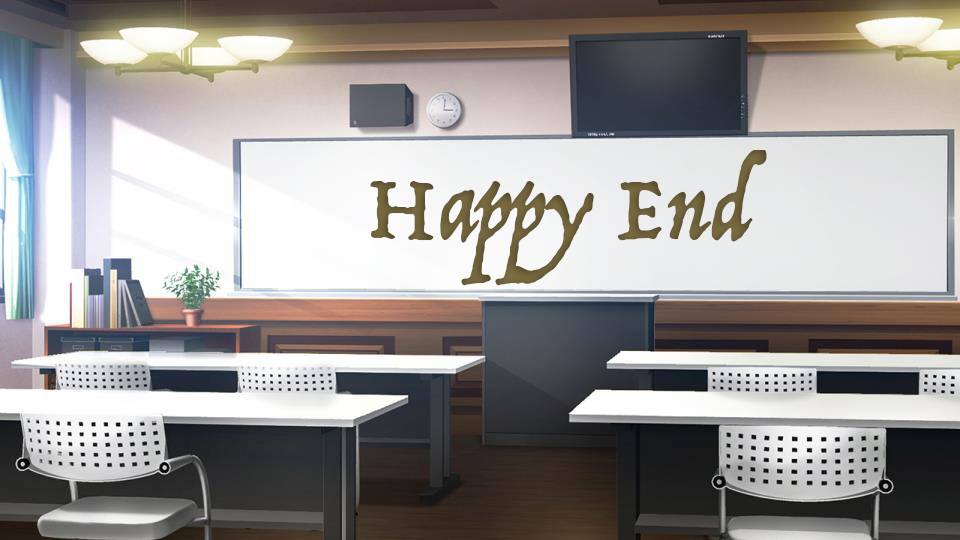
<style>
.page{position:relative;width:960px;height:540px}
.page>*{position:absolute;margin:0}
.t1{font:100px "Trattatello";color:#6d603a}
</style>
<div class="page">
<p class="t1" style="left:370px;top:150px;width:397px;height:136px">Happy End</p>
</div>
